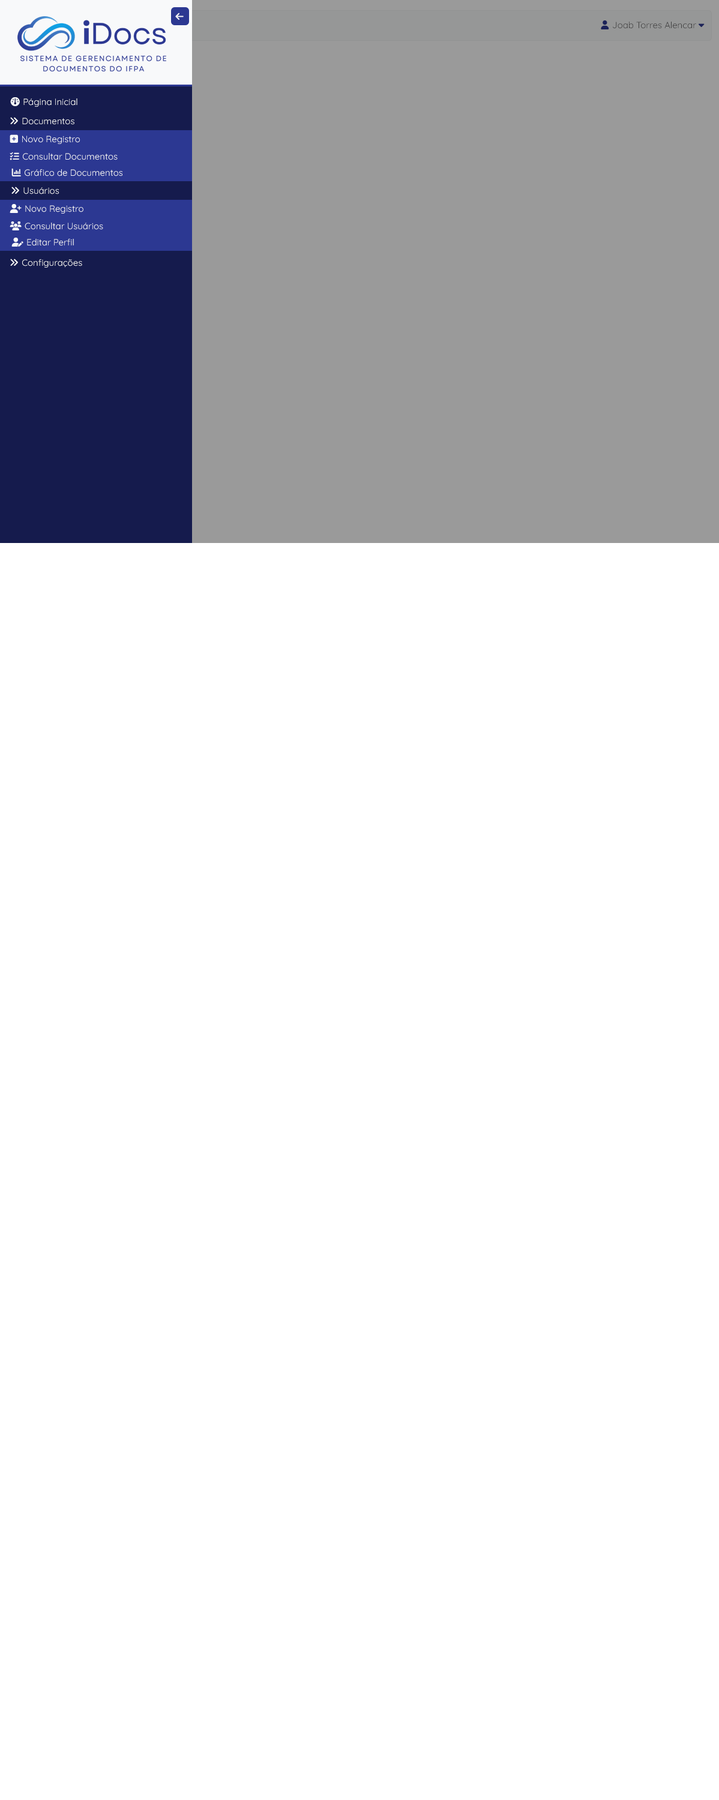
<style>
.page{position:relative;width:719px;height:1800px;background:#ffffff}
.page>*{position:absolute;margin:0}
.t1{font:9px "Quicksand-Regular";color:#1c2359}
.t2{font:9px "FontAwesome6Free-Solid";color:#1c2359}
.t3{font:9px "Quicksand-Regular";color:#f8f9fa}
.t4{font:9px "FontAwesome6Free-Solid";color:#f8f9fa}
</style>
<div class="page">
<p class="t1" style="left:601px;top:20px;width:103px;height:9px"><span class="t2">User </span>Joab Torres Alencar <span class="t2">caret-down</span></p>
<p class="t3" style="left:10px;top:97px;width:67px;height:10px"><span class="t4">gauge </span>Página Inicial</p>
<p class="t3" style="left:10px;top:134px;width:70px;height:10px"><span class="t4">square-plus </span>Novo Registro</p>
<p class="t3" style="left:10px;top:152px;width:108px;height:8px"><span class="t4">list-check </span>Consultar Documentos</p>
<p class="t3" style="left:11px;top:168px;width:112px;height:8px"><span class="t4">chart-column </span>Gráfico de Documentos</p>
<p class="t3" style="left:10px;top:204px;width:73px;height:10px"><span class="t4">user-plus </span>Novo Registro</p>
<p class="t3" style="left:10px;top:221px;width:93px;height:9px"><span class="t4">users </span>Consultar Usuários</p>
<p class="t3" style="left:11px;top:238px;width:63px;height:9px"><span class="t4">user-pen </span>Editar Perfil</p>
<p class="t3" style="left:10px;top:259px;width:72px;height:9px"><span class="t4">angles-right </span>Configurações</p>
</div>
